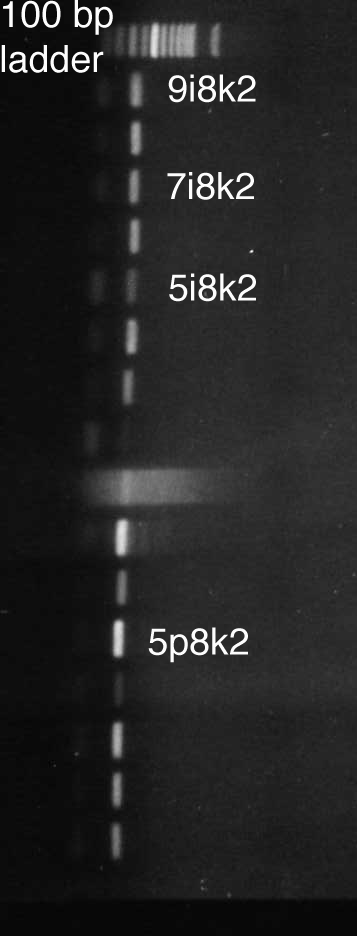
<style>
.page{position:relative;width:357px;height:936px}
.page>*{position:absolute;margin:0}
.t1{font:37.5px "Helvetica";color:#fdfdfd}
</style>
<div class="page">
<p class="t1" style="left:1px;top:0px;width:112px;height:73px">100 bp<br>ladder</p>
<p class="t1" style="left:168px;top:74px;width:88px;height:29px">9i8k2</p>
<p class="t1" style="left:167px;top:172px;width:87px;height:28px">7i8k2</p>
<p class="t1" style="left:169px;top:273px;width:87px;height:29px">5i8k2</p>
<p class="t1" style="left:148px;top:627px;width:100px;height:36px">5p8k2</p>
</div>
